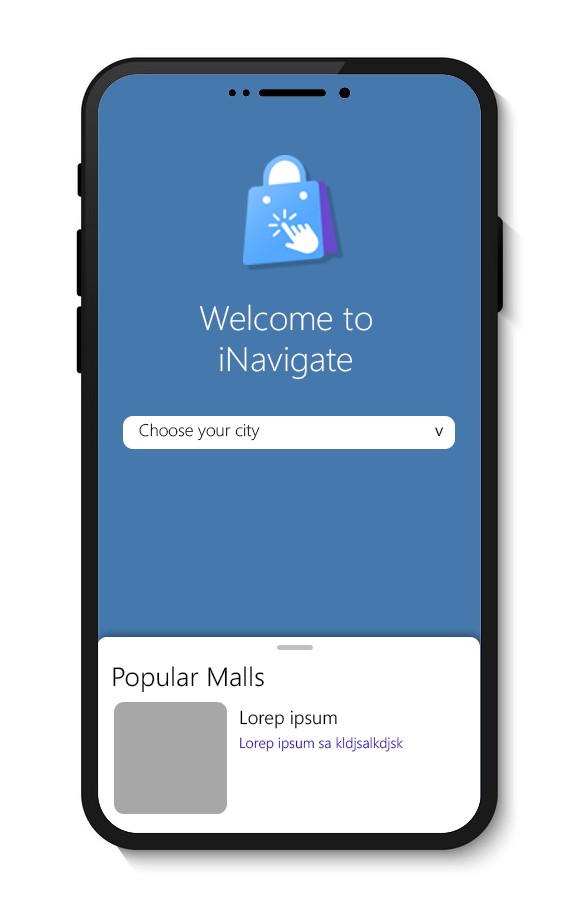
<style>
.page{position:relative;width:562px;height:924px;background:#ffffff}
.page>*{position:absolute;margin:0}
.t1{font:33.9px "SegoeUI-Light";color:#ffffff}
.t2{font:16.8px "SegoeUI-Light";color:#000000}
.t3{font:16.8px "SegoeUI";color:#000000}
.t4{font:26.6px "SegoeUI-Semilight";color:#000000}
.t5{font:18.5px "SegoeUI-Semilight";color:#000000}
.t6{font:14.5px "SegoeUI-Semilight";color:#3600be}
</style>
<div class="page">
<p class="t1" style="left:200px;top:304px;width:172px;height:76px;text-align:center">Welcome to<br>iNavigate</p>
<p class="t2" style="left:139px;top:423px;width:121px;height:18px">Choose your city</p>
<p class="t3" style="left:435px;top:427px;width:9px;height:9px">v</p>
<p class="t4" style="left:113px;top:666px;width:151px;height:26px">Popular Malls</p>
<p class="t5" style="left:240px;top:710px;width:97px;height:19px">Lorep ipsum</p>
<p class="t6" style="left:240px;top:737px;width:163px;height:15px">Lorep ipsum sa kldjsalkdjsk</p>
</div>
